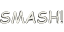
<style>
.page{position:relative;width:64px;height:32px;background:#ffffff}
.page>*{position:absolute;margin:0}
.t1{font:16px "ComicSansMS-Bold"}
</style>
<div class="page">
<p class="t1" style="left:0px;top:10px;width:63px;height:14px">SMASH!</p>
</div>
